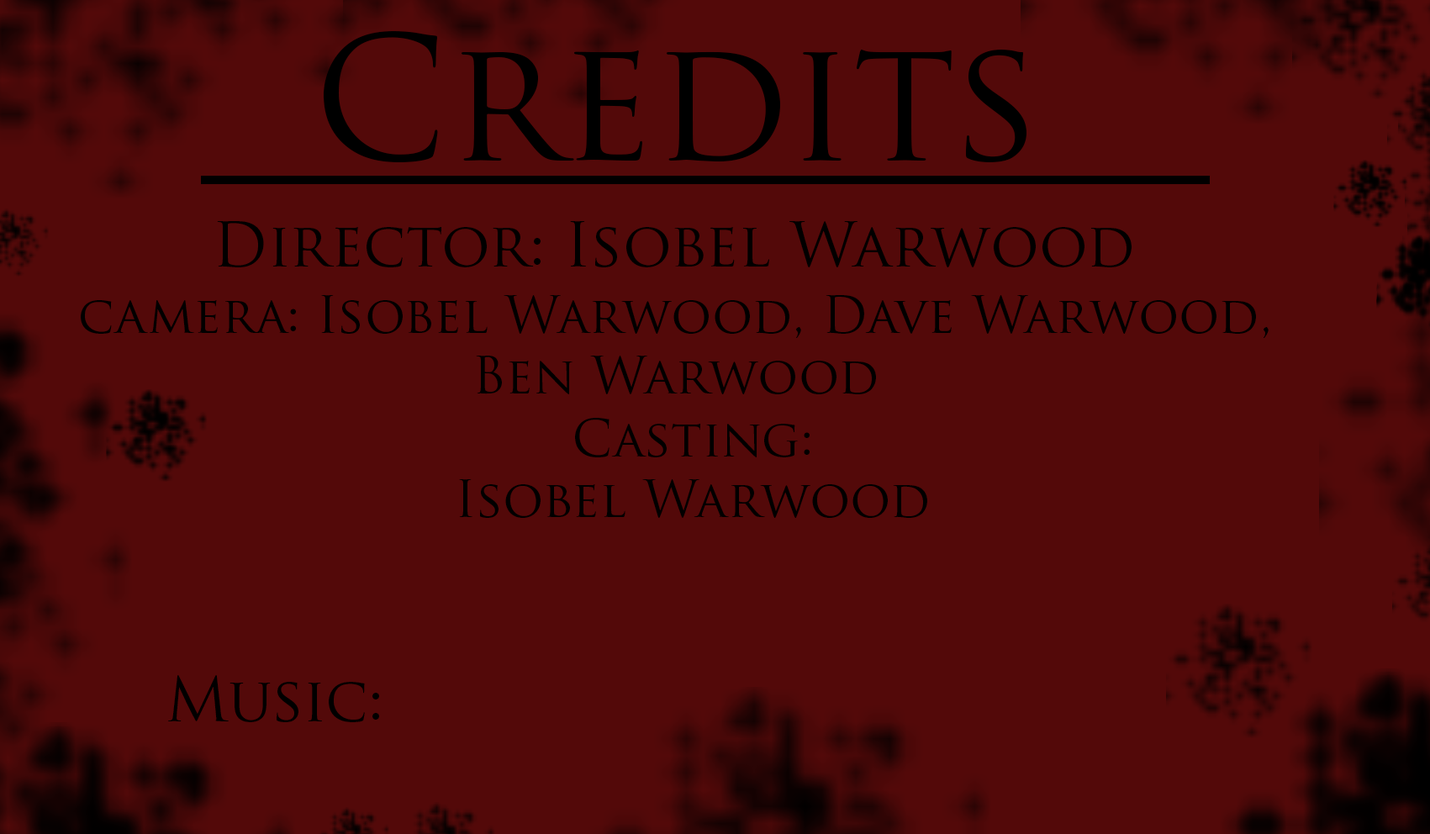
<style>
.page{position:relative;width:1430px;height:834px;background:#530909}
.page>*{position:absolute;margin:0}
.t1{font:168.1px "TrajanPro-Regular";color:#000000}
.t2{font:60.5px "TrajanPro-Regular";color:#000000}
.t3{font:50.4px "TrajanPro-Regular";color:#000000}
</style>
<div class="page">
<p class="t1" style="left:324px;top:31px;width:702px;height:131px">Credits</p>
<p class="t2" style="left:217px;top:221px;width:914px;height:46px">Director: Isobel Warwood</p>
<p class="t3" style="left:81px;top:295px;width:1188px;height:99px;text-align:center">camera: Isobel Warwood, Dave Warwood,<br>Ben Warwood</p>
<p class="t3" style="left:459px;top:418px;width:468px;height:100px;text-align:center">Casting:<br>Isobel Warwood</p>
<p class="t2" style="left:168px;top:675px;width:211px;height:47px">Music:</p>
</div>
